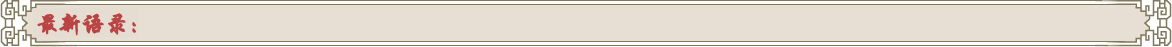
<style>
.page{position:relative;width:1172px;height:47px;background:#e8dfd4}
.page>*{position:absolute;margin:0}
.t1{font:24px "STXingkai";letter-spacing:-0.059em;color:#ba4343;font-weight:bold}
.t2{font:24px "STXinwei";letter-spacing:-0.059em;color:#ba4343;font-weight:bold}
</style>
<div class="page">
<p class="t1" style="left:37px;top:13px;width:99px;height:23px">最新语录<span class="t2">：</span></p>
</div>
